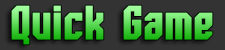
<style>
.page{position:relative;width:225px;height:50px;background:#333333}
.page>*{position:absolute;margin:0}
.t1{font:47.9px "Whitestone-Bold"}
</style>
<div class="page">
<p class="t1" style="left:11px;top:5px;width:202px;height:40px">Quick Game</p>
</div>
